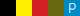
<style>
.page{position:relative;width:80px;height:16px;background:#feef00}
.page>*{position:absolute;margin:0}
.t1{font:13px "Junction"}
</style>
<div class="page">
<p class="t1" style="left:69px;top:3px;width:7px;height:10px">P</p>
</div>
